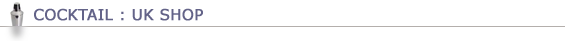
<style>
.page{position:relative;width:567px;height:42px;background:#ffffff}
.page>*{position:absolute;margin:0}
.t1{font:15px "Verdana";color:#636388;font-weight:bold}
</style>
<div class="page">
<p class="t1" style="left:34px;top:8px;width:169px;height:13px">COCKTAIL : UK SHOP</p>
</div>
